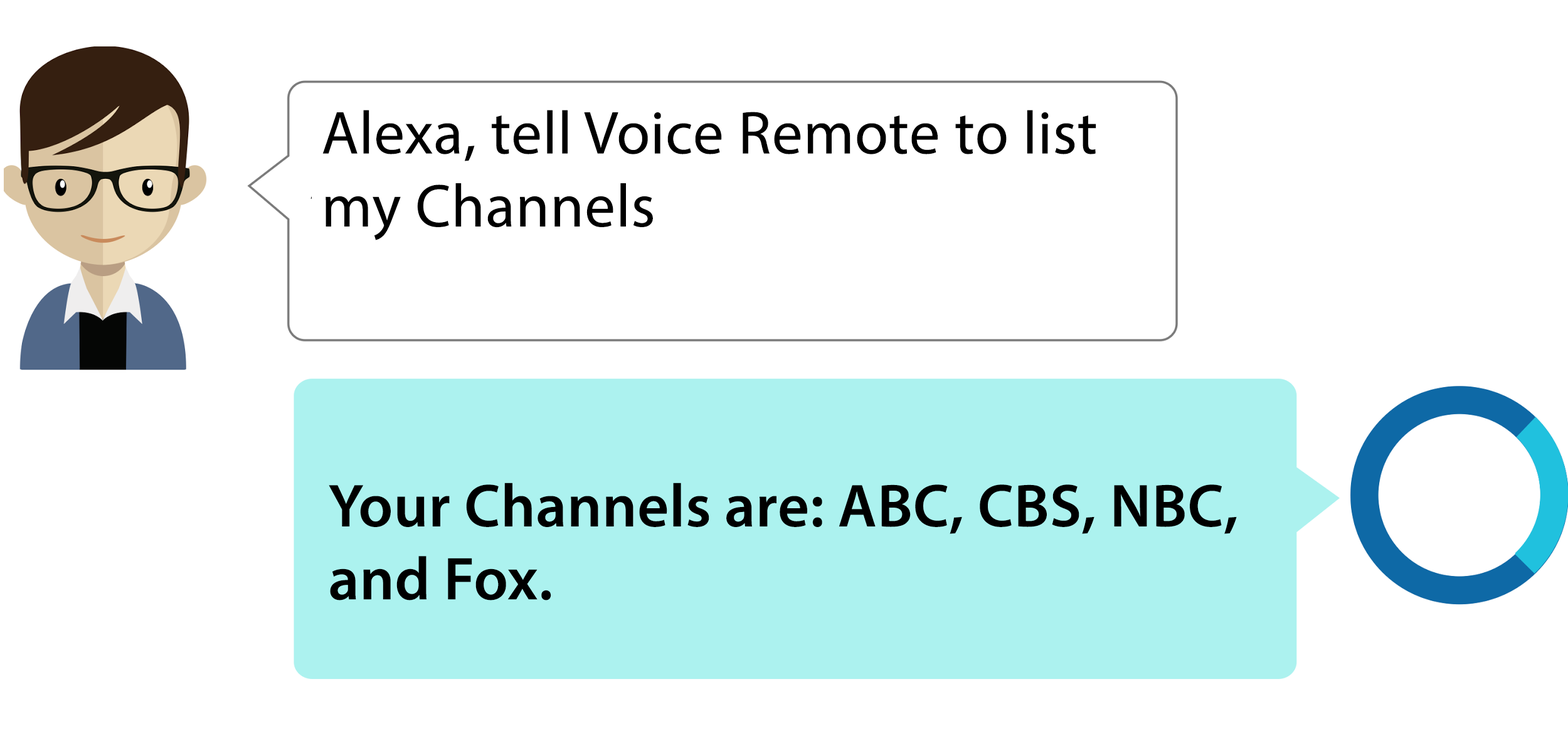
<style>
.page{position:relative;width:1568px;height:731px;background:#ffffff}
.page>*{position:absolute;margin:0}
.t1{font:60.8px "MyriadPro-Regular";letter-spacing:0.01em;color:#000000}
.t2{font:60.8px "MyriadPro-Semibold";letter-spacing:0.01em;color:#000000}
</style>
<div class="page">
<p class="t1" style="left:322px;top:110px;width:774px;height:130px">Alexa, tell Voice Remote to list my Channels</p>
<p class="t2" style="left:329px;top:482px;width:908px;height:118px">Your Channels are: ABC, CBS, NBC, and Fox.</p>
</div>
